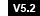
<style>
.page{position:relative;width:40px;height:16px;background:#000000}
.page>*{position:absolute;margin:0}
.t1{font:11px "Arial-BoldMT";color:#ffffff}
</style>
<div class="page">
<p class="t1" style="left:13px;top:4px;width:23px;height:8px">V5.2</p>
</div>
